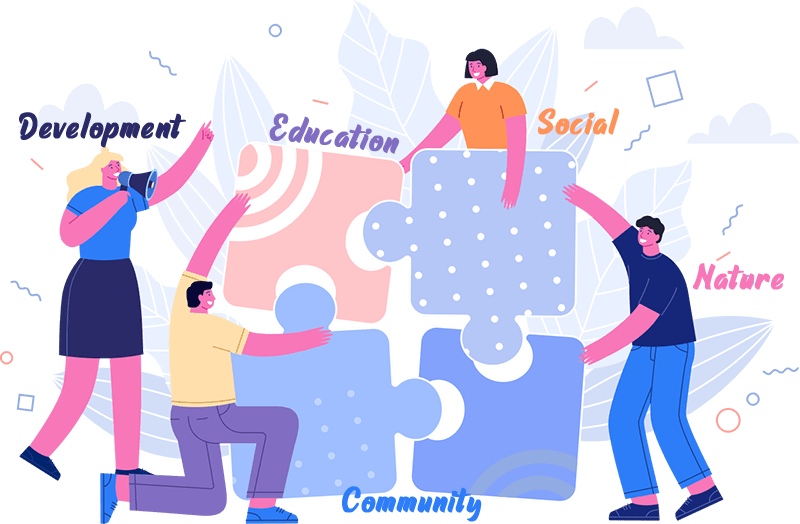
<style>
.page{position:relative;width:800px;height:524px;background:#ffffff}
.page>*{position:absolute;margin:0}
.t1{font:37px "RaphtaliaPersonalUseOnly";letter-spacing:0.02em;color:#2a2a68;font-weight:bold}
.t2{font:37px "RaphtaliaPersonalUseOnly";letter-spacing:0.02em;color:#816ec2;font-weight:bold}
.t3{font:37px "RaphtaliaPersonalUseOnly";letter-spacing:0.02em;color:#ff9256;font-weight:bold}
.t4{font:37px "RaphtaliaPersonalUseOnly";letter-spacing:0.02em;color:#f877b9;font-weight:bold}
.t5{font:37px "RaphtaliaPersonalUseOnly";letter-spacing:0.02em;color:#2d7df9;font-weight:bold}
</style>
<div class="page">
<p class="t1" style="left:19px;top:112px;width:167px;height:36px">Development</p>
<p class="t2" style="left:269px;top:113px;width:131px;height:41px;rotate:7deg">Education</p>
<p class="t3" style="left:538px;top:108px;width:81px;height:27px">Social</p>
<p class="t4" style="left:693px;top:263px;width:91px;height:27px">Nature</p>
<p class="t5" style="left:342px;top:486px;width:140px;height:36px">Community</p>
</div>
